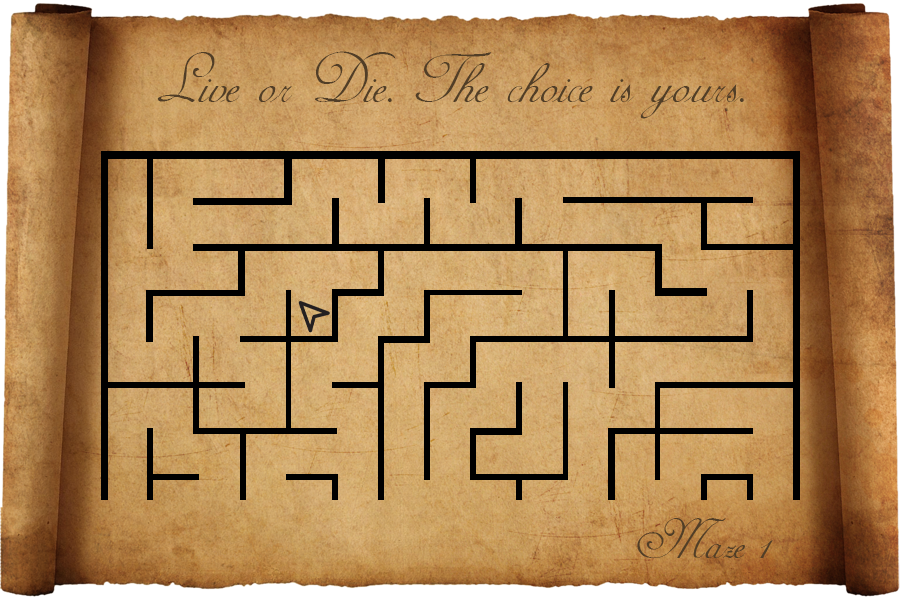
<style>
.page{position:relative;width:900px;height:600px}
.page>*{position:absolute;margin:0}
.t1{font:80px "AdineKirnberg-Script";color:#513e27}
.t2{font:64px "AdineKirnberg-Script";color:#513e27}
</style>
<div class="page">
<p class="t1" style="left:157px;top:51px;width:587px;height:68px">Live or Die. The choice is yours.</p>
<p class="t2" style="left:637px;top:518px;width:136px;height:40px">Maze 1</p>
</div>
